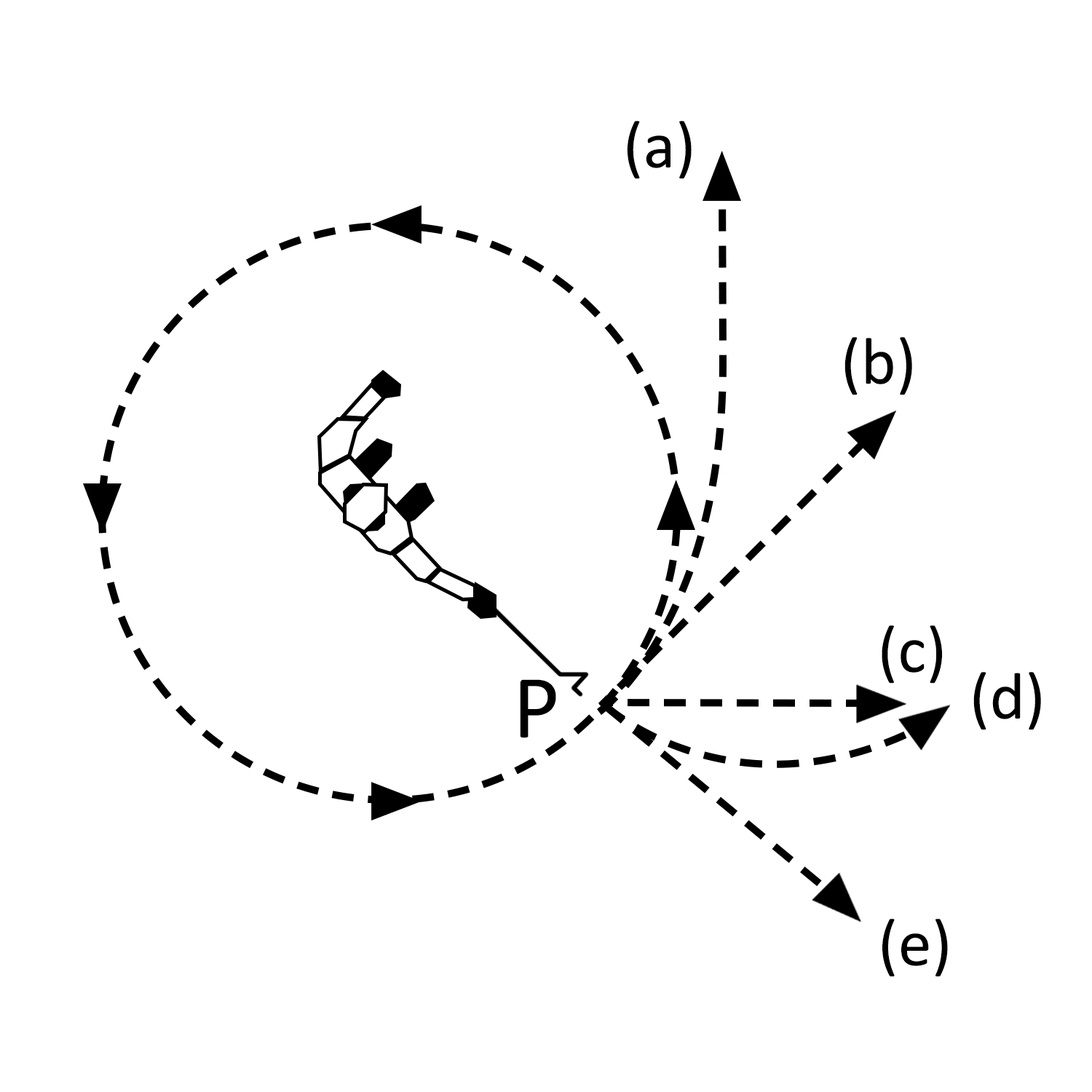
<style>
.page{position:relative;width:1092px;height:1092px;background:#ffffff}
.page>*{position:absolute;margin:0}
.t1{font:66.7px "Calibri";color:#000000}
.t2{font:91px "Calibri";color:#000000}
</style>
<div class="page">
<p class="t1" style="left:627px;top:121px;width:65px;height:58px">(a)</p>
<p class="t1" style="left:844px;top:337px;width:68px;height:58px">(b)</p>
<p class="t1" style="left:882px;top:625px;width:60px;height:59px">(c)</p>
<p class="t1" style="left:973px;top:672px;width:68px;height:58px">(d)</p>
<p class="t2" style="left:520px;top:679px;width:36px;height:59px">P</p>
<p class="t1" style="left:882px;top:919px;width:66px;height:58px">(e)</p>
</div>
